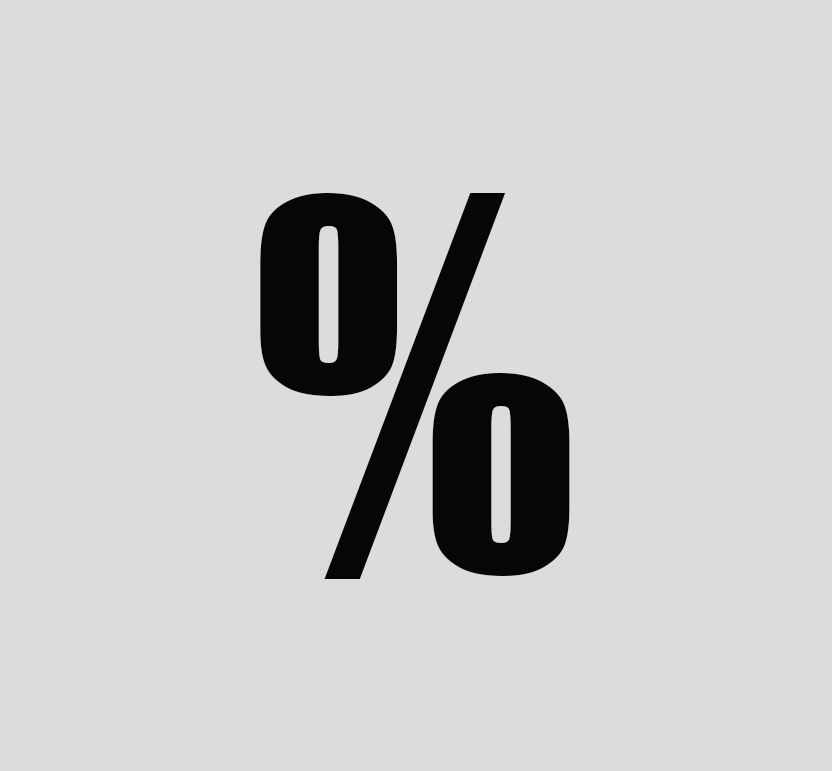
<style>
.page{position:relative;width:832px;height:771px;background:#dcdcdc}
.page>*{position:absolute;margin:0}
.t1{font:469.9px "Impact";color:#060606}
</style>
<div class="page">
<p class="t1" style="left:260px;top:193px;width:310px;height:386px">%</p>
</div>
